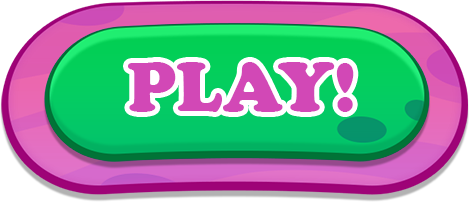
<style>
.page{position:relative;width:469px;height:202px}
.page>*{position:absolute;margin:0}
.t1{font:72px "CooperBlack";color:#d248b6}
</style>
<div class="page">
<p class="t1" style="left:128px;top:62px;width:226px;height:50px">PLAY!</p>
</div>
